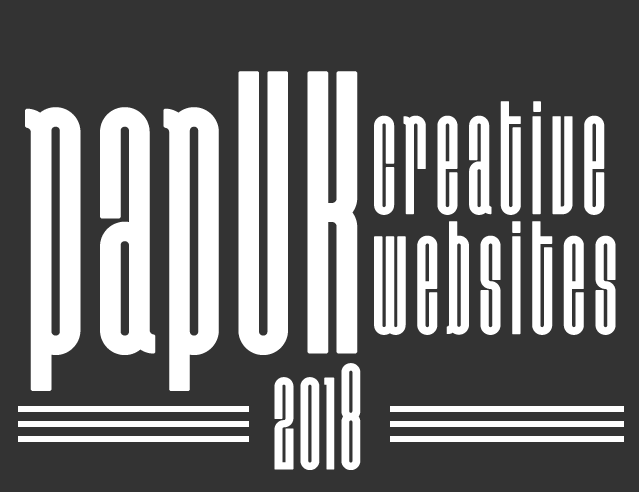
<style>
.page{position:relative;width:639px;height:492px;background:#333333}
.page>*{position:absolute;margin:0}
.t1{font:400px "Disclaimer-Classic";color:#ffffff;font-weight:bold}
.t2{font:160px/120px "Disclaimer-Classic";letter-spacing:0.025em;color:#ffffff;font-weight:bold}
.t3{font:150px "Disclaimer-Classic";color:#ffffff;font-weight:bold}
</style>
<div class="page">
<p class="t1" style="left:25px;top:71px;width:333px;height:320px">papUK</p>
<p class="t2" style="left:374px;top:101px;width:242px;height:234px">creative <br>websites</p>
<p class="t3" style="left:274px;top:363px;width:87px;height:107px">2018</p>
</div>
